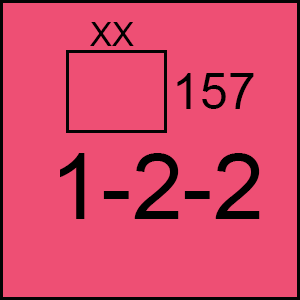
<style>
.page{position:relative;width:300px;height:300px;background:#ee4f74}
.page>*{position:absolute;margin:0}
.t1{font:33.3px "ArialMT";color:#000000}
.t2{font:50px "ArialMT";color:#000000}
.t3{font:91.7px "ArialMT";color:#000000}
</style>
<div class="page">
<p class="t1" style="left:90px;top:22px;width:44px;height:24px">XX</p>
<p class="t2" style="left:177px;top:73px;width:77px;height:36px">157</p>
<p class="t3" style="left:60px;top:153px;width:200px;height:66px">1-2-2</p>
</div>
